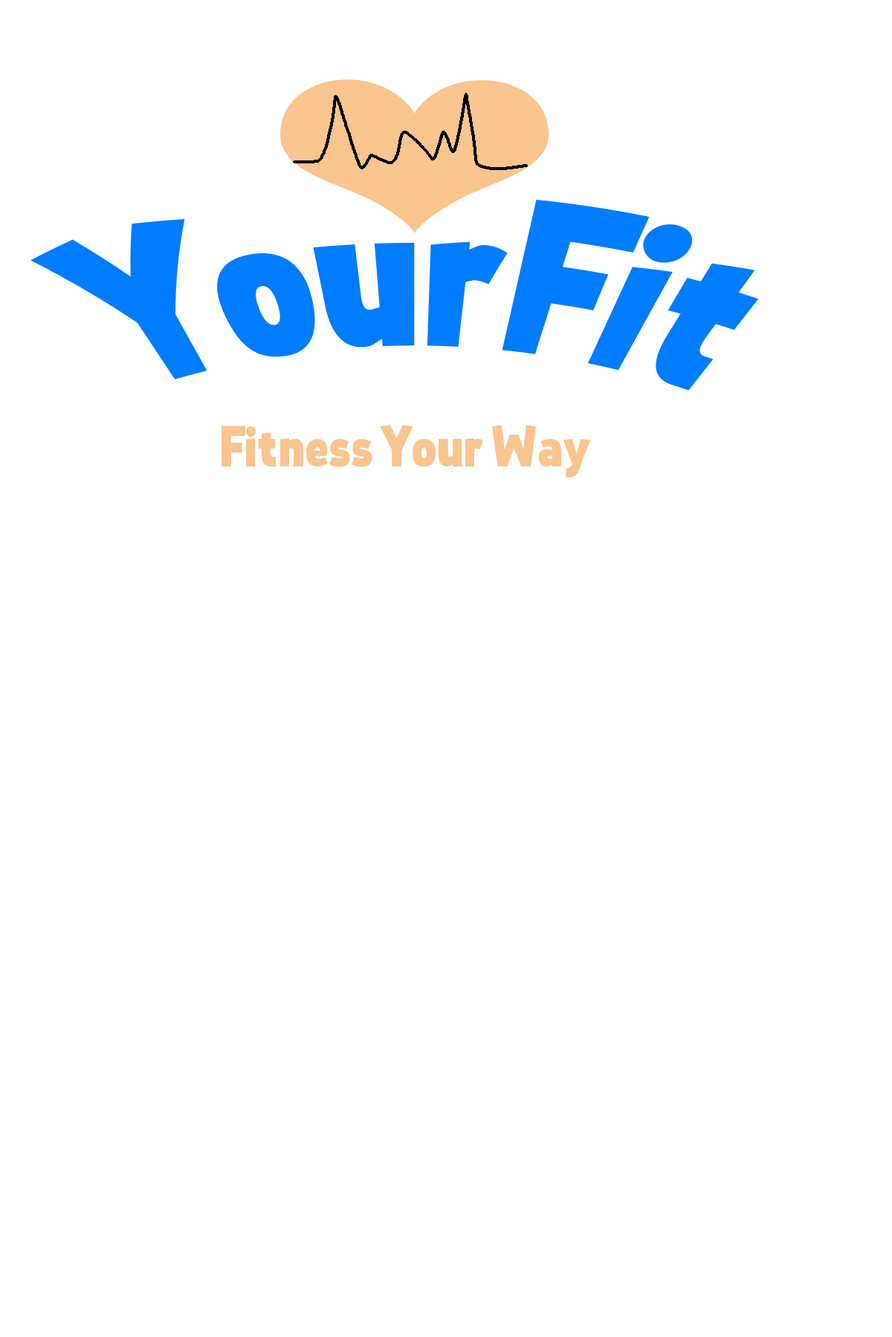
<style>
.page{position:relative;width:892px;height:1337px;background:#ffffff}
.page>*{position:absolute;margin:0}
.t1{font:203.2px "StTransmission-800ExtraBold";color:#007cff;scale:0.96 1}
.t2{font:58px "StTransmission-800ExtraBold";color:#f9c48e;scale:0.96 1}
</style>
<div class="page">
<p class="t1" style="left:30px;top:199px;width:729px;height:192px">YourFit</p>
<p class="t2" style="left:221px;top:425px;width:370px;height:53px">Fitness Your Way</p>
</div>
